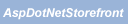
<style>
.page{position:relative;width:128px;height:24px;background:#9ab4d8}
.page>*{position:absolute;margin:0}
.t1{font:12px "Arial-BoldItalicMT";color:#ffffff}
</style>
<div class="page">
<p class="t1" style="left:3px;top:8px;width:121px;height:12px">AspDotNetStorefront</p>
</div>
